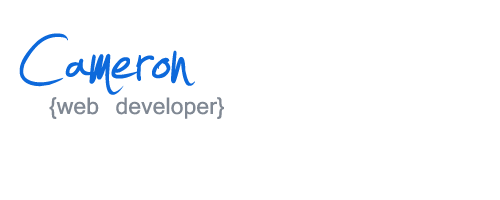
<style>
.page{position:relative;width:500px;height:200px;background:#ffffff}
.page>*{position:absolute;margin:0}
.t1{font:166.7px "Jellyka---Estrya's-Handwriting";color:#0d69db}
.t2{font:166.7px "Jellyka---Estrya's-Handwriting";color:#ffffff}
.t3{font:22.2px "Kartika";color:#808893}
</style>
<div class="page">
<p class="t1" style="left:19px;top:10px;width:302px;height:99px">Cameron <span class="t2">Anglin</span></p>
<p class="t3" style="left:49px;top:97px;width:175px;height:22px">{web developer}</p>
</div>
